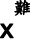
<style>
.page{position:relative;width:30px;height:39px;background:#ffffff}
.page>*{position:absolute;margin:0}
.t1{font:18px "DFKaiShu-SB-Estd-BF";color:#000000;font-weight:bold}
.t2{font:27px "ArialMT";color:#000000;font-weight:bold}
</style>
<div class="page">
<p class="t1" style="left:14px;top:0px;width:17px;height:16px">難</p>
<p class="t2" style="left:0px;top:23px;width:14px;height:16px">x</p>
</div>
